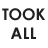
<style>
.page{position:relative;width:48px;height:48px;background:#ffffff}
.page>*{position:absolute;margin:0}
.t1{font:15.9px "CenturyGothic-Bold";color:#212121}
</style>
<div class="page">
<p class="t1" style="left:2px;top:8px;width:43px;height:31px;text-align:center">TOOK<br>ALL</p>
</div>
